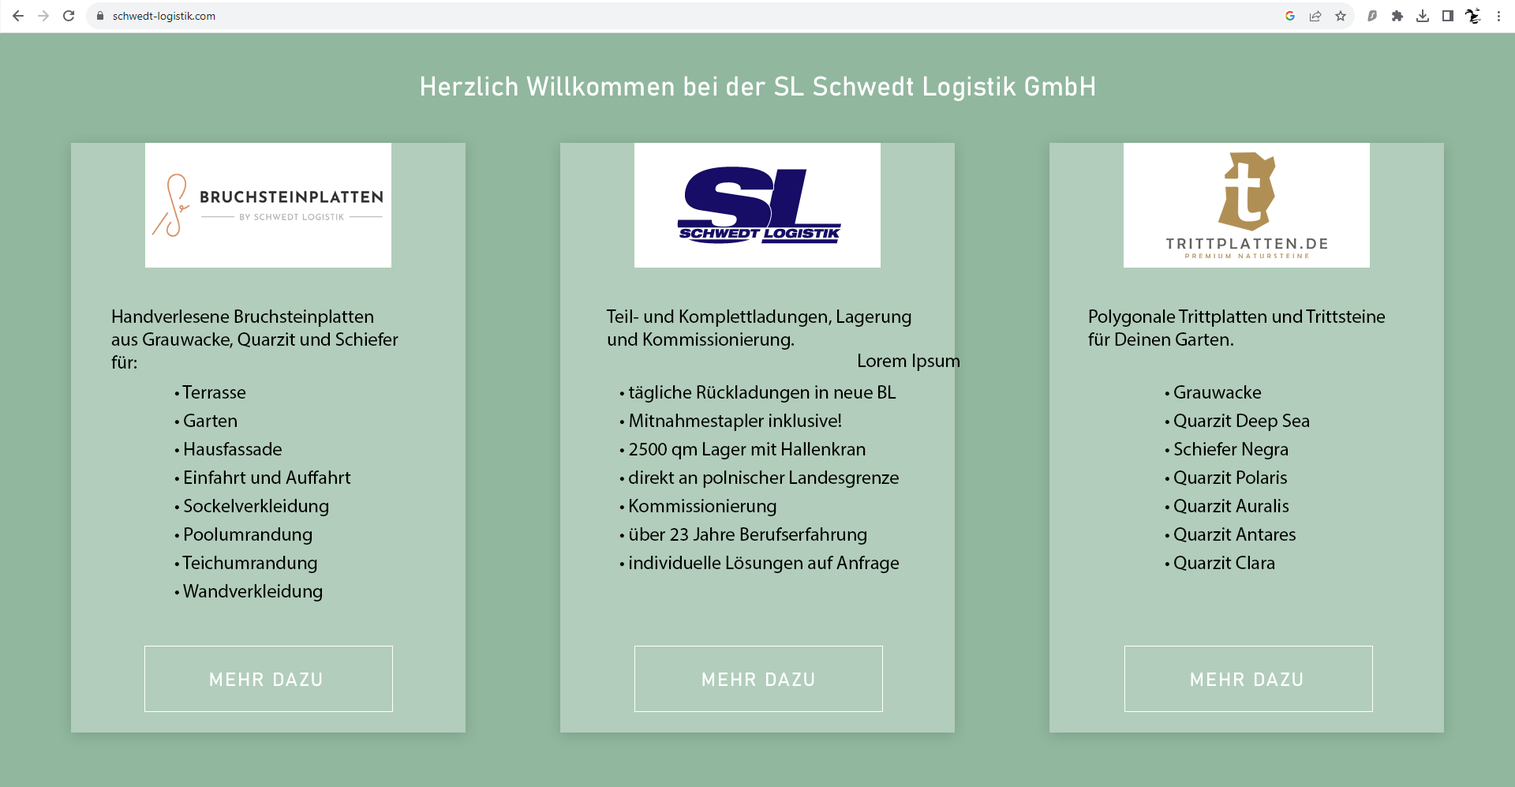
<style>
.page{position:relative;width:1515px;height:787px;background:#b2cdbb}
.page>*{position:absolute;margin:0}
.t1{font:26.8px "Bahnschrift";color:#ffffff}
.t2{font:18.9px "MyriadPro-Regular";color:#000000}
.t3{font:18.9px/28.4px "MyriadPro-Regular";color:#000000}
.t4{font:18.9px "Bahnschrift";letter-spacing:0.075em;color:#ffffff}
</style>
<div class="page">
<p class="t1" style="left:421px;top:76px;width:674px;height:25px">Herzlich Willkommen bei der SL Schwedt Logistik GmbH</p>
<p class="t2" style="left:111px;top:309px;width:288px;height:60px">Handverlesene Bruchsteinplatten<br>aus Grauwacke, Quarzit und Schiefer<br>für:</p>
<p class="t2" style="left:606px;top:309px;width:306px;height:41px">Teil- und Komplettladungen, Lagerung<br>und Kommissionierung.</p>
<p class="t2" style="left:1088px;top:309px;width:298px;height:37px">Polygonale Trittplatten und Trittsteine<br>für Deinen Garten.</p>
<p class="t2" style="left:859px;top:354px;width:101px;height:17px">Lorem Ipsum</p>
<p class="t3" style="left:174px;top:385px;width:177px;height:216px">• Terrasse<br>• Garten<br>• Hausfassade<br>• Einfahrt und Auffahrt<br>• Sockelverkleidung<br>• Poolumrandung<br>• Teichumrandung<br>• Wandverkleidung</p>
<p class="t3" style="left:620px;top:385px;width:280px;height:188px">• tägliche Rückladungen in neue BL<br>• Mitnahmestapler inklusive!<br>• 2500 qm Lager mit Hallenkran<br>• direkt an polnischer Landesgrenze<br>• Kommissionierung<br>• über 23 Jahre Berufserfahrung<br>• individuelle Lösungen auf Anfrage</p>
<p class="t3" style="left:1165px;top:385px;width:145px;height:186px">• Grauwacke<br>• Quarzit Deep Sea<br>• Schiefer Negra<br>• Quarzit Polaris<br>• Quarzit Auralis<br>• Quarzit Antares<br>• Quarzit Clara</p>
<p class="t4" style="left:210px;top:672px;width:112px;height:15px">MEHR DAZU</p>
<p class="t4" style="left:702px;top:672px;width:113px;height:15px">MEHR DAZU</p>
<p class="t4" style="left:1191px;top:672px;width:112px;height:15px">MEHR DAZU</p>
</div>
